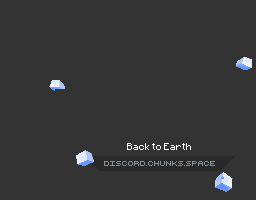
<style>
.page{position:relative;width:256px;height:200px;background:#333333}
.page>*{position:absolute;margin:0}
.t1{font:8px "Minecraftia-Regular";color:#ffffff}
.t2{font:5px "CytooxienExclusive5px";color:#8b9198}
</style>
<div class="page">
<p class="t1" style="left:127px;top:143px;width:64px;height:7px">Back to Earth</p>
<p class="t2" style="left:104px;top:161px;width:111px;height:5px">DISCORD.CHUNKS.SPACE</p>
</div>
